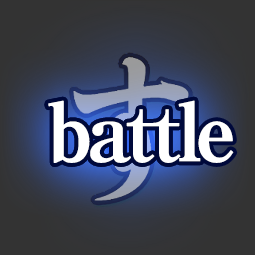
<style>
.page{position:relative;width:255px;height:255px}
.page>*{position:absolute;margin:0}
.t1{font:80px "RyuminPro-ExBold";letter-spacing:-0.08em;color:#ffffff;font-weight:bold}
</style>
<div class="page">
<p class="t1" style="left:48px;top:100px;width:153px;height:63px">battl</p>
<p class="t1" style="left:48px;top:100px;width:186px;height:63px">battle</p>
</div>
